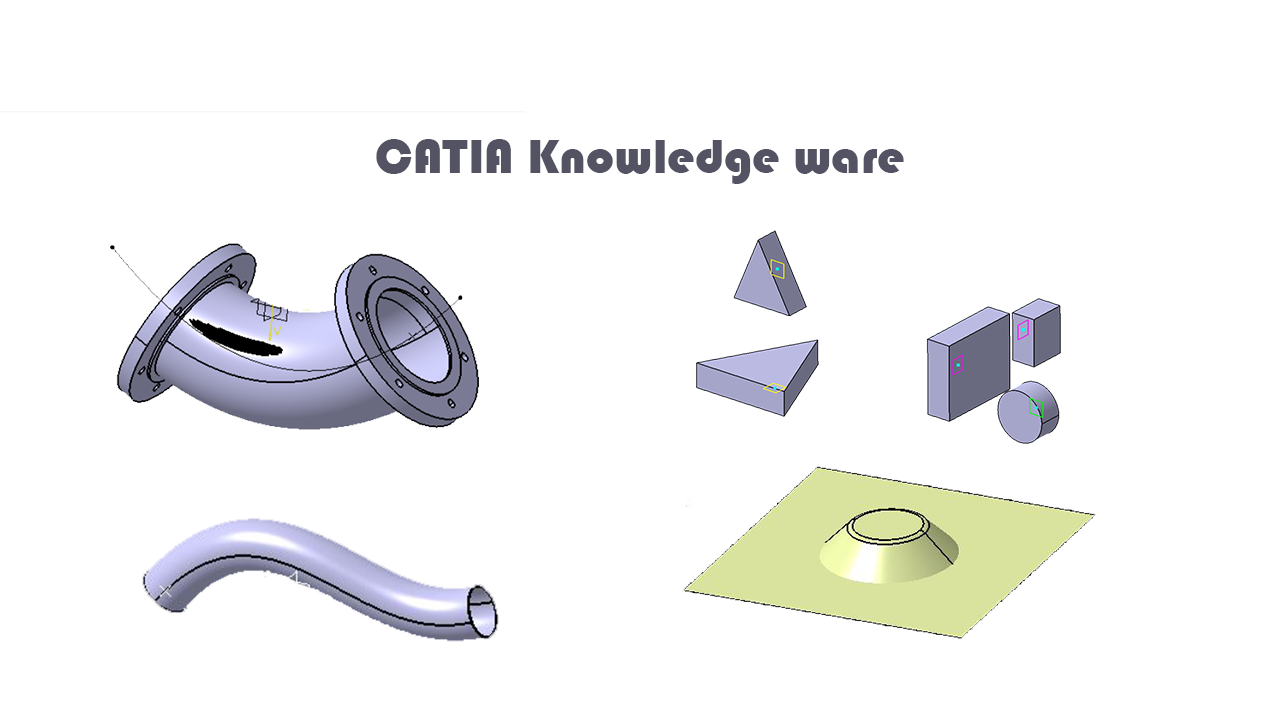
<style>
.page{position:relative;width:1280px;height:720px;background:#ffffff}
.page>*{position:absolute;margin:0}
.t1{font:12px "Bauhaus93";color:#535364}
</style>
<div class="page">
<p class="t1" style="left:376px;top:139px;width:528px;height:45px">CATIA Knowledge ware</p>
</div>
